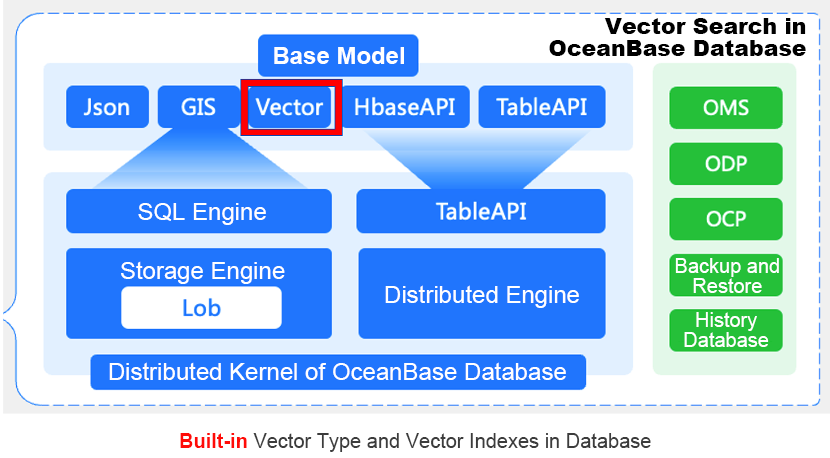
<style>
.page{position:relative;width:830px;height:458px;background:#ffffff}
.page>*{position:absolute;margin:0}
.t1{font:22px/22px "Arial-Black";color:#000000}
.t2{font:24px "Arial-BoldMT";color:#ffffff}
.t3{font:12px/14px "ArialMT";color:#ffffff}
.t4{font:20px/20px "ArialMT";color:#ffffff}
.t5{font:12px "ArialMT";color:#ffffff}
.t6{font:20px "ArialMT";color:#3c3c3c}
.t7{font:20px "Arial-BoldMT";color:#ff0b07}
</style>
<div class="page">
<p class="t1" style="left:549px;top:18px;width:257px;height:38px;text-align:right">Vector Search in<br> OceanBase Database</p>
<p class="t2" style="left:274px;top:47px;width:130px;height:17px">Base Model</p>
<p class="t3" style="left:138px;top:203px;width:128px;height:22px;text-align:center">SQL Engine</p>
<p class="t3" style="left:121px;top:261px;width:164px;height:23px;text-align:center">Storage Engine</p>
<p class="t4" style="left:675px;top:258px;width:104px;height:35px;text-align:center">Backup and Restore</p>
<p class="t3" style="left:385px;top:285px;width:194px;height:23px;text-align:center">Distributed Engine</p>
<p class="t4" style="left:684px;top:312px;width:85px;height:35px;text-align:center">History Database</p>
<p class="t5" style="left:109px;top:362px;width:457px;height:18px">Distributed Kernel of OceanBase Database</p>
<p class="t6" style="left:180px;top:433px;width:471px;height:19px"><span class="t7">Built-in</span> Vector Type and Vector Indexes in Database</p>
</div>
